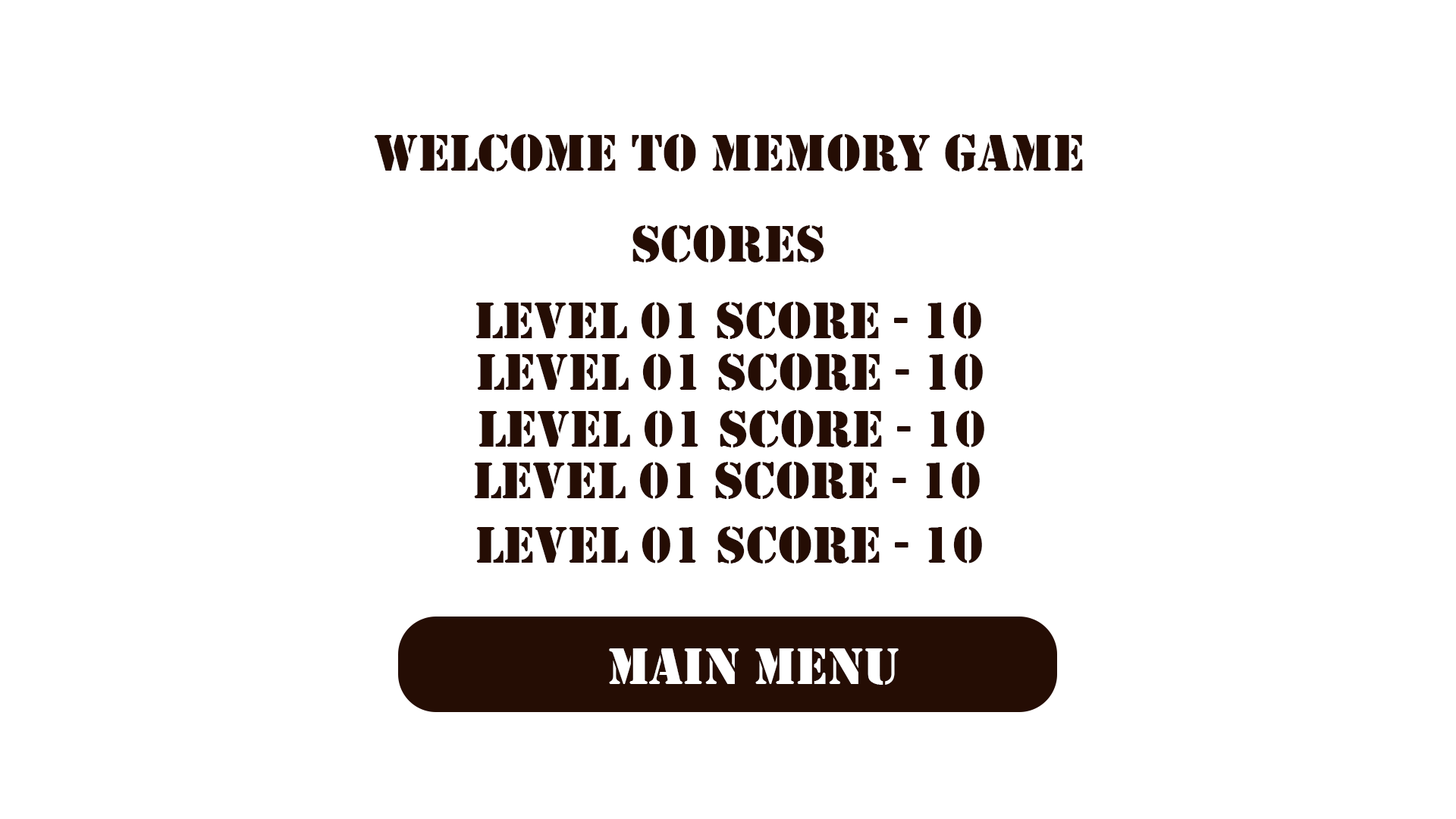
<style>
.page{position:relative;width:1456px;height:819px;background:#ffffff}
.page>*{position:absolute;margin:0}
.t1{font:53.8px "Stencil";color:#250d04}
.t2{font:53.8px "Stencil";color:#ffffff}
</style>
<div class="page">
<p class="t1" style="left:375px;top:133px;width:708px;height:38px">Welcome to Memory Game</p>
<p class="t1" style="left:632px;top:224px;width:192px;height:38px">Scores</p>
<p class="t1" style="left:475px;top:301px;width:506px;height:38px">Level 01 Score - 10</p>
<p class="t1" style="left:477px;top:353px;width:506px;height:38px">Level 01 Score - 10</p>
<p class="t1" style="left:479px;top:409px;width:505px;height:38px">Level 01 Score - 10</p>
<p class="t1" style="left:474px;top:461px;width:506px;height:38px">Level 01 Score - 10</p>
<p class="t1" style="left:476px;top:526px;width:506px;height:37px">Level 01 Score - 10</p>
<p class="t2" style="left:609px;top:648px;width:290px;height:37px">Main Menu</p>
</div>
